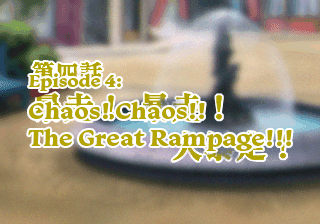
<style>
.page{position:relative;width:320px;height:224px}
.page>*{position:absolute;margin:0}
.t1{font:24px/27px "Monarcha-Bold";color:#b5a500}
.t2{font:18px/30px "Monarcha-Bold";color:#b5a500}
.t3{font:24px/32px "Monarcha-Bold";color:#b5a500}
</style>
<div class="page">
<p class="t1" style="left:28px;top:73px;width:264px;height:78px"><span class="t2">Episode 4:<br></span><span class="t3">Chaos! Chaos!!<br></span>The Great Rampage!!!</p>
</div>
